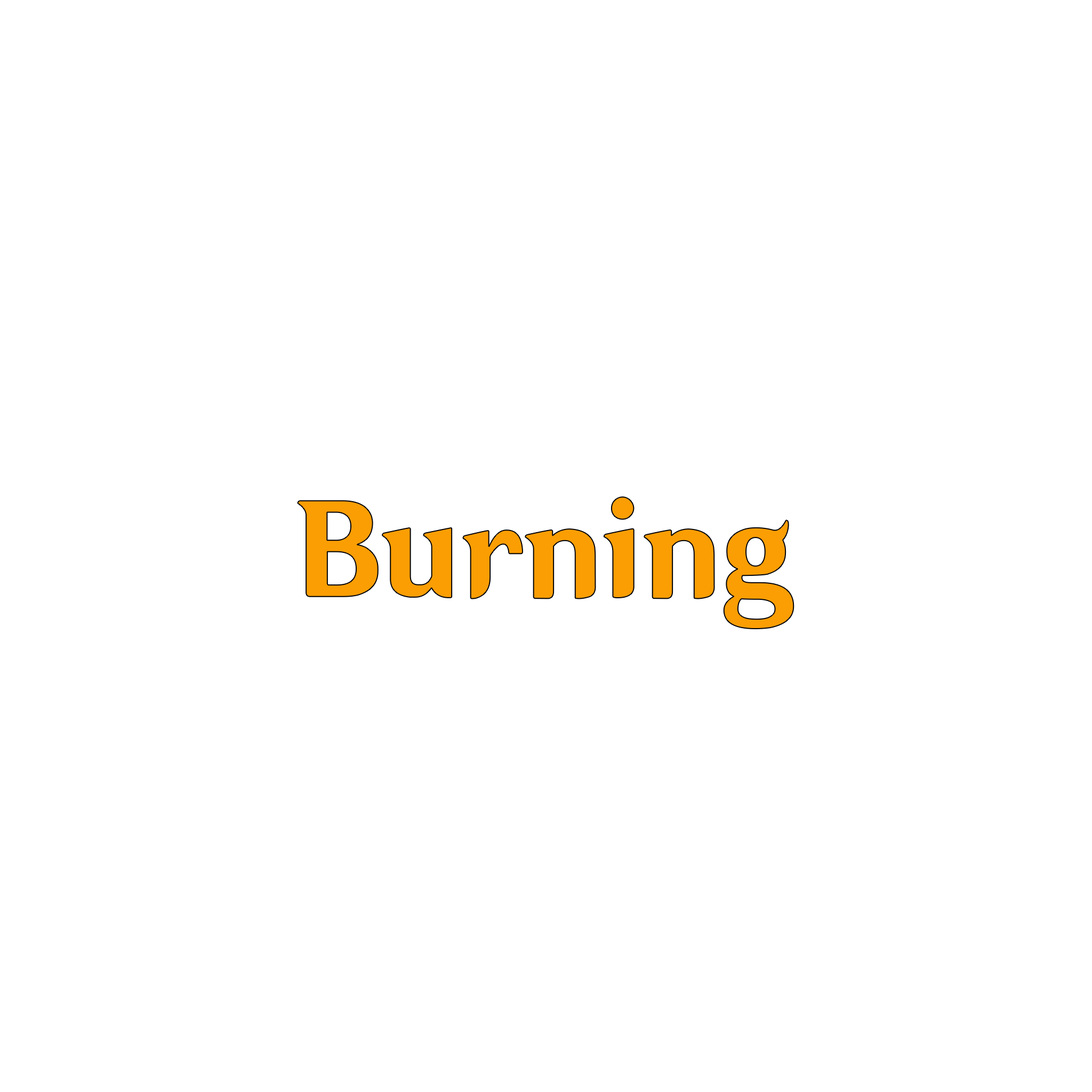
<style>
.page{position:relative;width:1092px;height:1092px;background:#ffffff}
.page>*{position:absolute;margin:0}
.t1{font:122.2px "Default_SC-85W";color:#fb9e04}
</style>
<div class="page">
<p class="t1" style="left:298px;top:497px;width:496px;height:132px">Burning</p>
</div>
